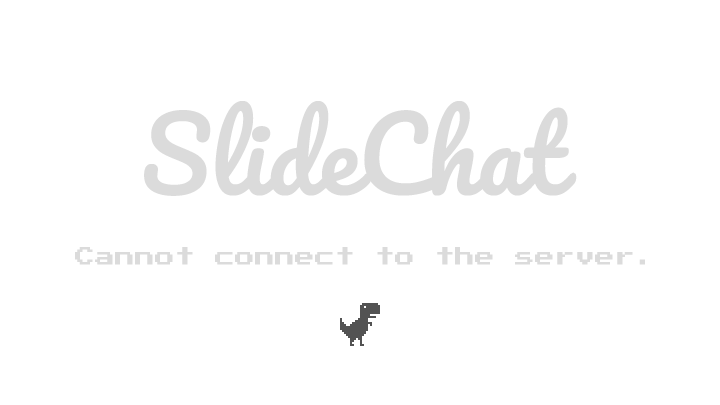
<style>
.page{position:relative;width:720px;height:405px;background:#ffffff}
.page>*{position:absolute;margin:0}
.t1{font:100px "Pacifico-Regular";color:#dbdbdb}
.t2{font:20px "PressStart2P-Regular";color:#dbdbdb}
</style>
<div class="page">
<p class="t1" style="left:144px;top:101px;width:433px;height:95px">SlideChat</p>
<p class="t2" style="left:75px;top:247px;width:570px;height:18px">Cannot connect to the server.</p>
</div>
